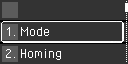
<style>
.page{position:relative;width:128px;height:64px;background:#333333}
.page>*{position:absolute;margin:0}
.t1{font:16px "PixelOperator";color:#ffffff}
</style>
<div class="page">
<p class="t1" style="left:6px;top:27px;width:9px;height:9px">1.</p>
<p class="t1" style="left:20px;top:27px;width:29px;height:9px">Mode</p>
<p class="t1" style="left:6px;top:49px;width:10px;height:9px">2.</p>
<p class="t1" style="left:20px;top:49px;width:41px;height:11px">Homing</p>
</div>
